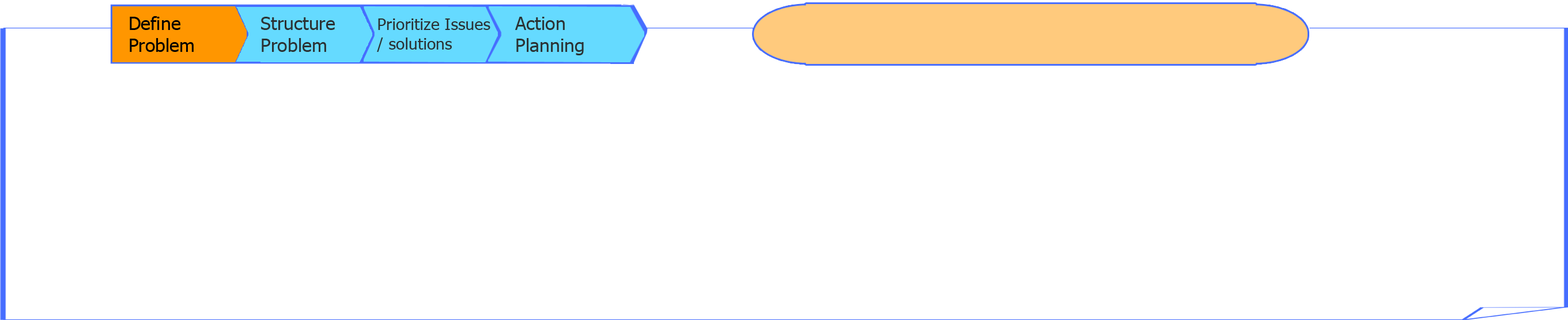
<style>
.page{position:relative;width:1568px;height:320px;background:#ffffff}
.page>*{position:absolute;margin:0}
.t1{font:18.4px "Tahoma";color:#000000}
.t2{font:18.4px "Tahoma";color:#2b3234}
.t3{font:16.4px "Tahoma";color:#2b3234}
</style>
<div class="page">
<p class="t1" style="left:130px;top:16px;width:64px;height:36px">Define<br>Problem</p>
<p class="t2" style="left:261px;top:17px;width:74px;height:35px">Structure<br>Problem</p>
<p class="t2" style="left:515px;top:17px;width:69px;height:38px">Action<br>Planning</p>
<p class="t3" style="left:377px;top:18px;width:113px;height:34px">Prioritize Issues<br>/ solutions</p>
</div>
